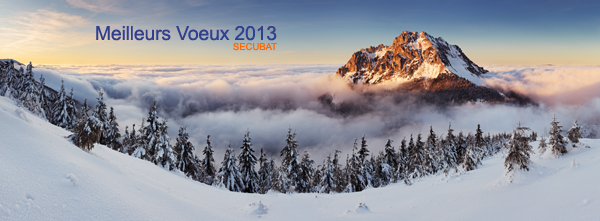
<style>
.page{position:relative;width:600px;height:221px}
.page>*{position:absolute;margin:0}
.t1{font:19.4px "ArialMT";letter-spacing:-0.01em;color:#303f90}
.t2{font:13.8px "ArialMT";letter-spacing:-0.01em;color:#ff6600;font-variant:small-caps}
</style>
<div class="page">
<p class="t1" style="left:96px;top:26px;width:181px;height:15px">Meilleurs Voeux 2013</p>
<p class="t2" style="left:233px;top:42px;width:44px;height:9px">secubat</p>
</div>
